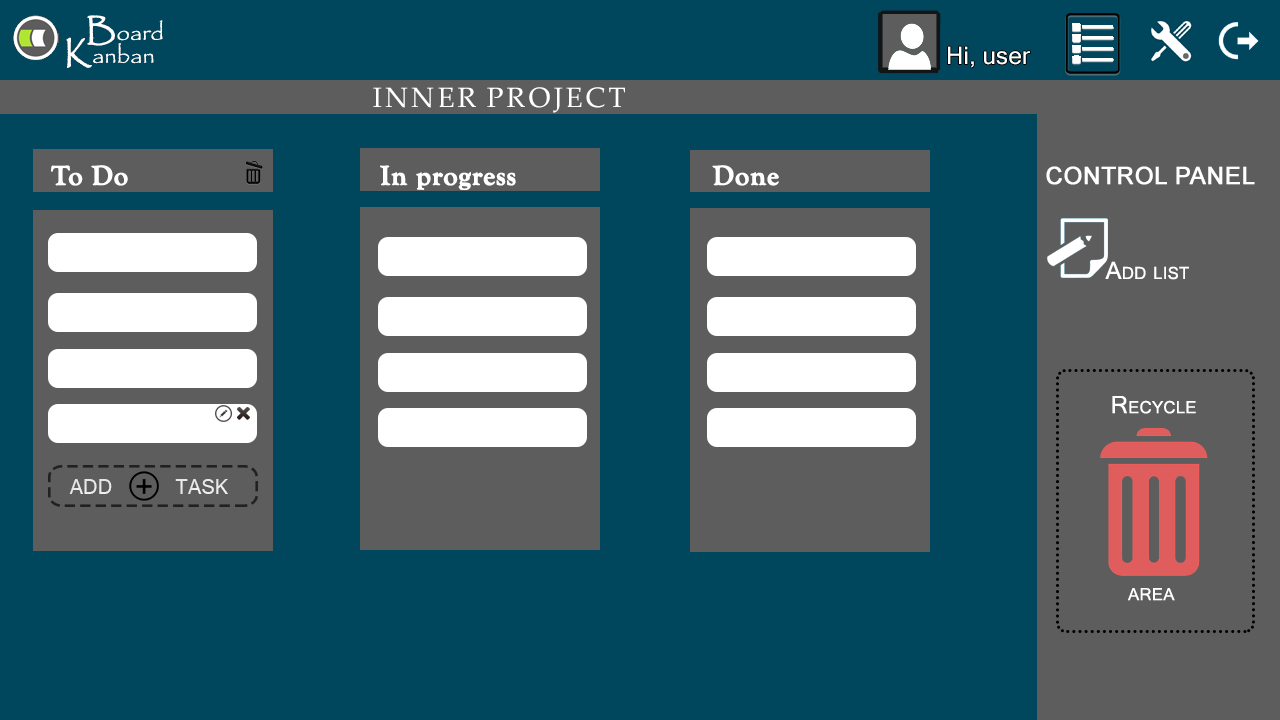
<style>
.page{position:relative;width:1280px;height:720px;background:#00475d}
.page>*{position:absolute;margin:0}
.t1{font:24px "Papyrus-Regular";color:#ffffff}
.t2{font:30px "Papyrus-Regular";color:#ffffff;font-weight:bold}
.t3{font:24px "MicrosoftSansSerif";letter-spacing:0.01em;color:#fefefe}
.t4{font:28px "PalatinoLinotype-Roman";letter-spacing:0.01em;color:#ffffff;text-transform:uppercase}
.t5{font:28px "GoudyOldStyleT-Bold";letter-spacing:0.01em;color:#ffffff;font-weight:bold}
.t6{font:24px "ArialMT";letter-spacing:0.005em;color:#ffffff;text-transform:uppercase;font-weight:bold}
.t7{font:24px "MicrosoftSansSerif";letter-spacing:0.01em;color:#ffffff;font-variant:small-caps}
.t8{font:20px "MicrosoftSansSerif";letter-spacing:0.005em;color:#e9e9e9;text-transform:uppercase}
.t9{font:20px "MicrosoftSansSerif";letter-spacing:0.005em;color:#ffffff;text-transform:uppercase}
</style>
<div class="page">
<p class="t1" style="left:87px;top:15px;width:76px;height:31px"><span class="t2">B</span>oard</p>
<p class="t1" style="left:66px;top:37px;width:88px;height:31px"><span class="t2">K</span>anban</p>
<p class="t3" style="left:948px;top:46px;width:82px;height:22px">Hi, user</p>
<p class="t4" style="left:373px;top:87px;width:252px;height:26px">Inner Project</p>
<p class="t5" style="left:51px;top:165px;width:77px;height:21px">To Do</p>
<p class="t5" style="left:380px;top:165px;width:136px;height:25px">In progress</p>
<p class="t5" style="left:712px;top:165px;width:67px;height:21px">Done</p>
<p class="t6" style="left:1046px;top:166px;width:209px;height:19px">Control Panel</p>
<p class="t7" style="left:1105px;top:261px;width:84px;height:19px">Add list</p>
<p class="t7" style="left:1112px;top:396px;width:84px;height:18px">Recycle</p>
<p class="t8" style="left:69px;top:479px;width:43px;height:15px">Add</p>
<p class="t9" style="left:175px;top:479px;width:53px;height:15px">Task</p>
<p class="t7" style="left:1128px;top:588px;width:47px;height:13px">area</p>
</div>
